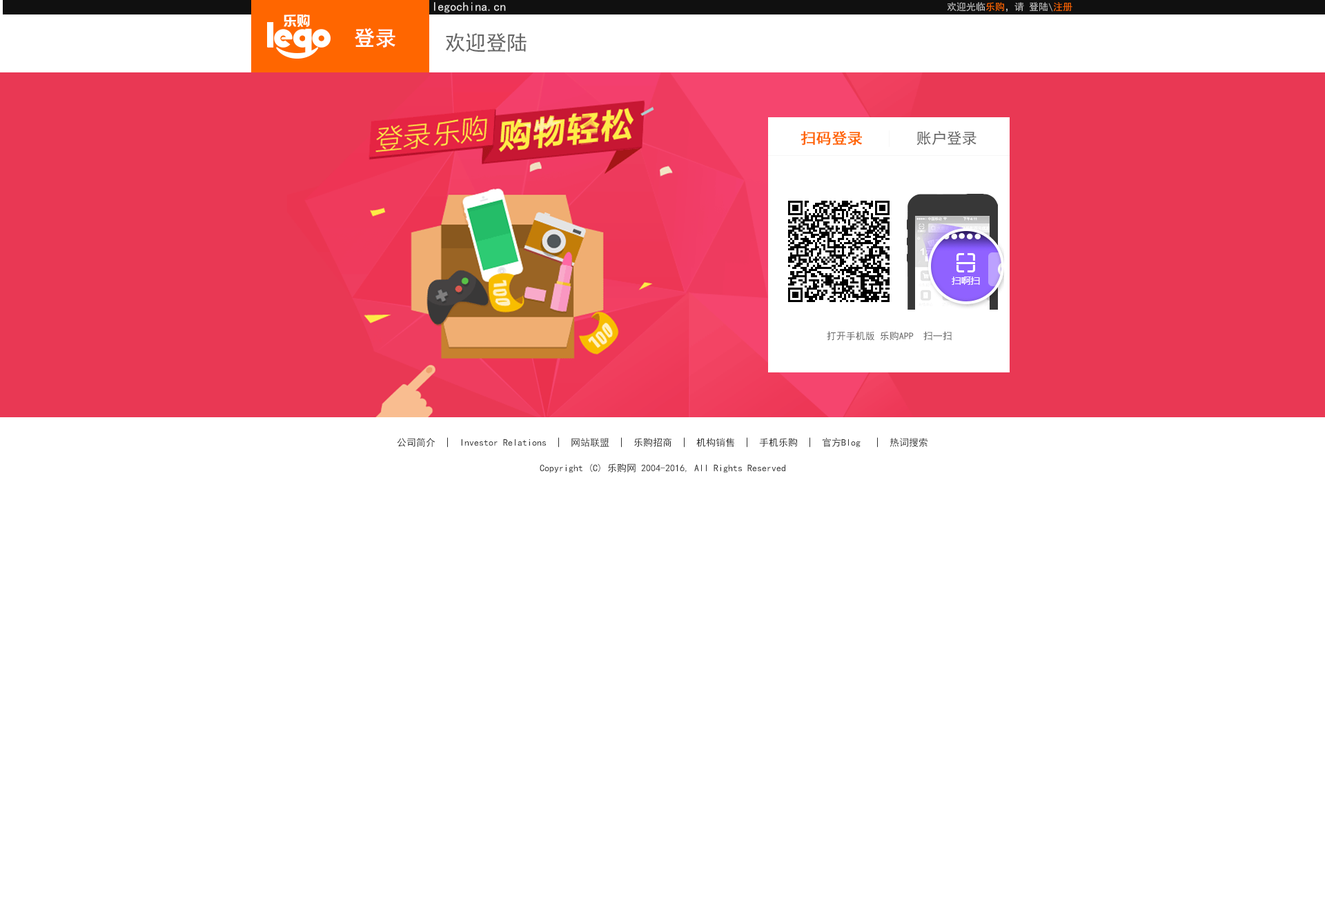
<style>
.page{position:relative;width:1325px;height:900px;background:#ffffff}
.page>*{position:absolute;margin:0}
.t1{font:12.4px "SimHei";color:#e6e6e6}
.t2{font:9.7px "SimHei";color:#bfbfbf}
.t3{font:9.7px "SimHei";color:#ff6600}
.t4{font:20.7px "SimHei";color:#ffffff;font-weight:bold}
.t5{font:20.7px "SimHei";color:#666666}
.t6{font:15.2px "SimHei";color:#ff6600;font-weight:bold}
.t7{font:15.2px "SimHei";color:#666666}
.t8{font:9.7px "SimHei";color:#666666}
.t9{font:9.7px "SimHei";color:#333333}
</style>
<div class="page">
<p class="t1" style="left:434px;top:2px;width:72px;height:10px">legochina.cn</p>
<p class="t2" style="left:946px;top:2px;width:126px;height:10px">欢迎光临<span class="t3">乐购</span>，请 登陆\<span class="t3">注册</span></p>
<p class="t4" style="left:355px;top:28px;width:40px;height:20px">登录</p>
<p class="t5" style="left:446px;top:33px;width:80px;height:19px">欢迎登陆</p>
<p class="t6" style="left:800px;top:131px;width:62px;height:15px">扫码登录</p>
<p class="t7" style="left:916px;top:131px;width:60px;height:15px">账户登录</p>
<p class="t8" style="left:826px;top:331px;width:125px;height:10px">打开手机版 乐购APP  扫一扫</p>
<p class="t9" style="left:397px;top:437px;width:530px;height:11px">公司简介  |  Investor Relations  |  网站联盟  |  乐购招商  |  机构销售  |  手机乐购  |  官方Blog   |  热词搜索</p>
<p class="t9" style="left:539px;top:464px;width:246px;height:9px">Copyright (C) 乐购网 2004-2016, All Rights Reserved</p>
</div>
